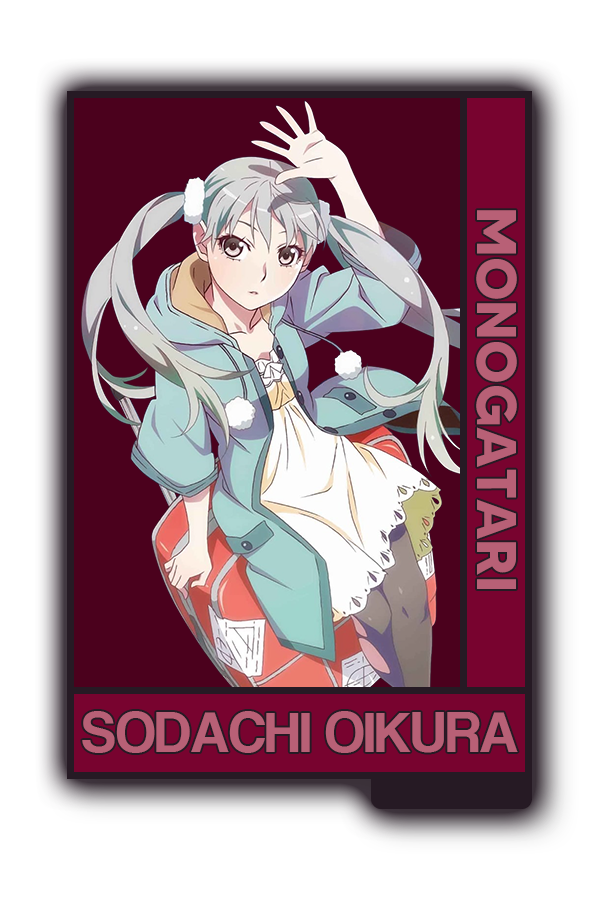
<style>
.page{position:relative;width:600px;height:900px;background:#ffffff}
.page>*{position:absolute;margin:0}
.t1{font:55.8px "MADETOMMY-Bold";color:#b86076}
.t2{font:59px "CoolveticaRg-Regular";color:#b86076}
</style>
<div class="page">
<p class="t1" style="left:476px;top:210px;width:41px;height:379px;rotate:90deg">MONOGATARI</p>
<p class="t2" style="left:82px;top:711px;width:436px;height:42px">SODACHI OIKURA</p>
</div>
